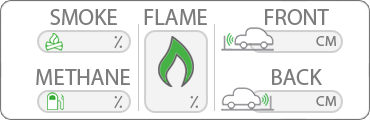
<style>
.page{position:relative;width:370px;height:120px;background:#ffffff}
.page>*{position:absolute;margin:0}
.t1{font:22.8px "MyriadArabic-Regular";color:#7c7c7c}
.t2{font:18.5px "MyriadArabic-Regular";color:#7c7c7c}
.t3{font:14.9px "MyriadArabic-Regular";color:#7c7c7c}
</style>
<div class="page">
<p class="t1" style="left:50px;top:9px;width:67px;height:16px">SMOKE</p>
<p class="t1" style="left:144px;top:9px;width:63px;height:16px">FLAME</p>
<p class="t1" style="left:265px;top:9px;width:64px;height:16px">FRONT</p>
<p class="t2" style="left:114px;top:35px;width:9px;height:14px">%</p>
<p class="t3" style="left:316px;top:36px;width:20px;height:10px">CM</p>
<p class="t1" style="left:36px;top:69px;width:94px;height:16px">METHANE</p>
<p class="t1" style="left:272px;top:69px;width:50px;height:16px">BACK</p>
<p class="t2" style="left:114px;top:95px;width:9px;height:14px">%</p>
<p class="t2" style="left:190px;top:95px;width:9px;height:14px">%</p>
<p class="t3" style="left:316px;top:96px;width:20px;height:10px">CM</p>
</div>
